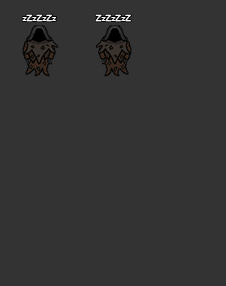
<style>
.page{position:relative;width:226px;height:286px;background:#333333}
.page>*{position:absolute;margin:0}
.t1{font:8px "ComicSansMS";color:#ffffff}
</style>
<div class="page">
<p class="t1" style="left:22px;top:14px;width:34px;height:8px">zZzZzZz</p>
<p class="t1" style="left:95px;top:14px;width:36px;height:8px">ZzZzZzZ</p>
</div>
